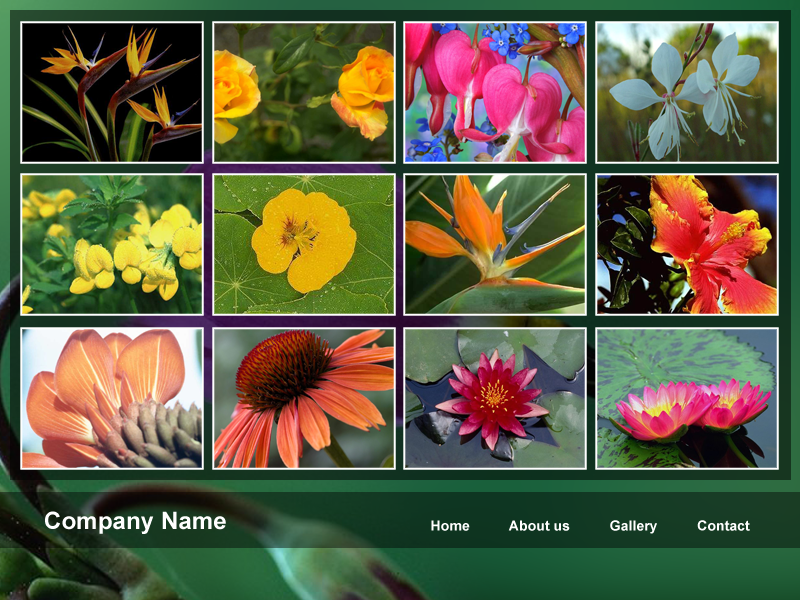
<style>
.page{position:relative;width:800px;height:600px}
.page>*{position:absolute;margin:0}
.t1{font:24px "Arial-BoldMT";letter-spacing:0.005em;color:#ffffff}
.t2{font:14px "Arial-BoldMT";letter-spacing:0.005em;color:#ffffff}
</style>
<div class="page">
<p class="t1" style="left:45px;top:511px;width:181px;height:23px">Company Name</p>
<p class="t2" style="left:431px;top:520px;width:319px;height:14px">Home          About us          Gallery          Contact</p>
</div>
